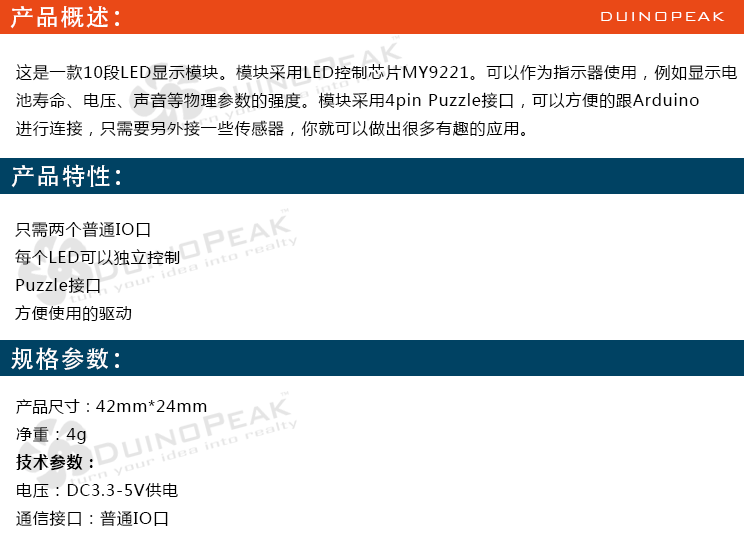
<style>
.page{position:relative;width:744px;height:553px;background:#ffffff}
.page>*{position:absolute;margin:0}
.t1{font:24px "AdobeHeitiStd-Regular";letter-spacing:0.05em;color:#ffffff}
.t2{font:18px "BankGothicBT-Light";letter-spacing:0.05em;color:#ffffff}
.t3{font:16px "MicrosoftYaHei";letter-spacing:0.05em;color:#000000}
.t4{font:16px "MicrosoftYaHei";color:#000000}
.t5{font:16px "MicrosoftYaHei-Bold";letter-spacing:0.05em;color:#000000}
</style>
<div class="page">
<p class="t1" style="left:10px;top:6px;width:109px;height:23px">产品概述：</p>
<p class="t2" style="left:601px;top:12px;width:124px;height:9px">DUINOPEAK</p>
<p class="t3" style="left:16px;top:64px;width:722px;height:73px">这是一款10段LED显示模块。模块采用LED控制芯片MY9221。可以作为指示器使用，例如显示电<br>池寿命、电压、声音等物理参数的强度。模块采用4pin Puzzle接口，可以方便的跟Arduino<br>进行连接，只需要另外接一些传感器，你就可以做出很多有趣的应用。</p>
<p class="t1" style="left:11px;top:164px;width:109px;height:24px">产品特性：</p>
<p class="t3" style="left:15px;top:221px;width:165px;height:100px">只需两个普通IO口<br>每个LED可以独立控制<br>Puzzle接口<br>方便使用的驱动</p>
<p class="t1" style="left:11px;top:347px;width:108px;height:23px">规格参数：</p>
<p class="t3" style="left:16px;top:399px;width:191px;height:127px"><span class="t4">产品尺寸：</span>42mm*24mm<br>净重：4g<br><span class="t5">技术参数：<br></span>电压：DC3.3-5V供电<br>通信接口：普通IO口</p>
</div>
